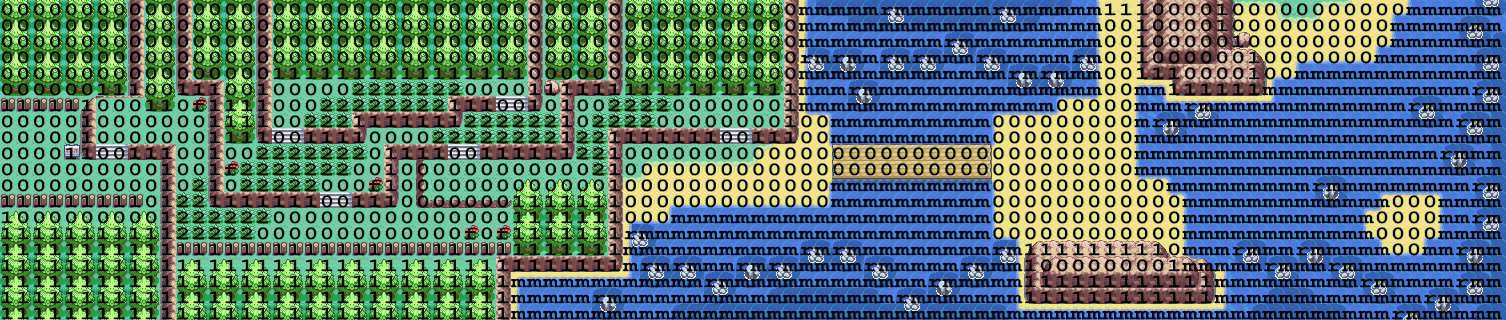
<style>
.page{position:relative;width:1506px;height:320px}
.page>*{position:absolute;margin:0}
.t1{font:19.2px/16px "CourierNewPS-BoldMT";letter-spacing:0.066em;color:#000000;scale:1.25 1}
</style>
<div class="page">
<p class="t1" style="left:1px;top:3px;width:1501px;height:317px">00000000000000000000000000000000000000000000000000mmmmmrmmmmmmrmmmmmm1110000100000000000mmmmmm<br>00000000000000000000000000000000000000000000000000mmmmmmmmmmmmmmmmmmm001000010000000000mmmmmmm<br>00000000000000000000000000000000000000000000000000mmmmmmmmmrmmmmmmmmm001000001000000000mmmmmmm<br>00000000000000000000000000000000000000000000000000rmrmmrmrmmmrmmmmmrm00100000010000000mmmmmmmm<br>00000000000000000111111111111111100000000000000000mmmmmmmmmmmmmrmrmmm001110000100mmmmmmmmmmmmm<br>00000011100111001000002222222000011111111111111111mmmrmmmmmmmmmmmmmmm00mm111111mmmmmmmmmmmmmrm<br>111111000110f1111000222222221110010100222200000001mmmmmmmmmmmmmmmm00000mmmrmmmmmmmmmmmmmrmmmmm<br>0000010000000111100222111111122222210222200000000100mmmmmmmmmm000000000mrmmmmmmmmmmmmmmmmmmrmm<br>0000010000000111100111100002222222212211111110011100mmmmmmmmmm000000000mmmmmmmmmmmmmmmmmmmmmmm<br>00001100111001002222222011110011111122100000000000000000000000000000000mmmmmmmmmmmmmmmmmmmrmmm<br>00000000001001f22222220010000000000002100000000000000000000000000000000mmmmmmmmmmmmmmmmmmmmmmm<br>00000000001021022222000f1000000000000010000000000000mmmmmmmmmm00000000000mmmmmmmmmrmmmmmmmmmrm<br>1111111110122111111100111000000011111110000000000000mmmmmmmmmm000000000000mmmmmmmmmmmmm000mmmm<br>100000000012222220000000000000001111111000mmmmmmmmmmmmmmmmmmmm000000000000mmmmmmmmmmmm0000mmrm<br>11111111111222220000000000000f0f1111111rmmmmmmmmmmmmmmmmmmmmmm000000000000mmmmmmmmmmmm0000mmmm<br>111111111111111111111111111111111111111mmmmmmmmmmmrmrmmmmmmmmmrm1111111110mmmrmmmrmmmmm00mmrmm<br>111111111111111111111111111111111111111mrmrmmmrmrmmmmmrmmmmmrmmm1000000001mmmmmrmmmrmmmmmmmmmm<br>11111111111111111111111111111111mmmmmmmmmmmmrmmmmmmmmmmmmmrmmmmm111111111111mmmmmmmmmrmmmmmrmm<br>11111111111111111111111111111111mmmmmrmmmmmmmmmmmmmmmmmmrmmmmmmm111111111111mmmmmmmmmmmmmrmmmm<br>11111111111111111111111111111111mmmmmmmmmmmmmmmmmmmmmmmmmmmmmmmmmmmmmmmmmmmmmmmmmmmmmmmrmmmmmm</p>
</div>
